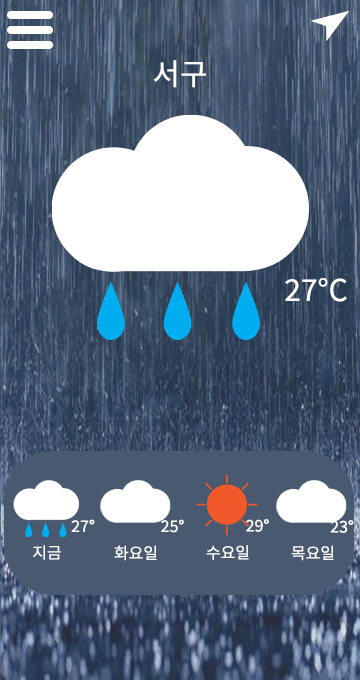
<style>
.page{position:relative;width:360px;height:680px}
.page>*{position:absolute;margin:0}
.t1{font:30px "NotoSansKR-Regular";color:#ffffff}
.t2{font:16px "NotoSansKR-Regular";color:#ffffff}
</style>
<div class="page">
<p class="t1" style="left:153px;top:60px;width:53px;height:28px">서구</p>
<p class="t1" style="left:285px;top:278px;width:62px;height:24px">27°C</p>
<p class="t2" style="left:71px;top:519px;width:24px;height:13px">27°</p>
<p class="t2" style="left:161px;top:519px;width:23px;height:14px">25°</p>
<p class="t2" style="left:246px;top:519px;width:23px;height:13px">29°</p>
<p class="t2" style="left:330px;top:520px;width:24px;height:13px">23°</p>
<p class="t2" style="left:33px;top:545px;width:28px;height:15px">지금</p>
<p class="t2" style="left:114px;top:545px;width:43px;height:16px">화요일</p>
<p class="t2" style="left:206px;top:545px;width:43px;height:15px">수요일</p>
<p class="t2" style="left:291px;top:545px;width:43px;height:16px">목요일</p>
</div>
